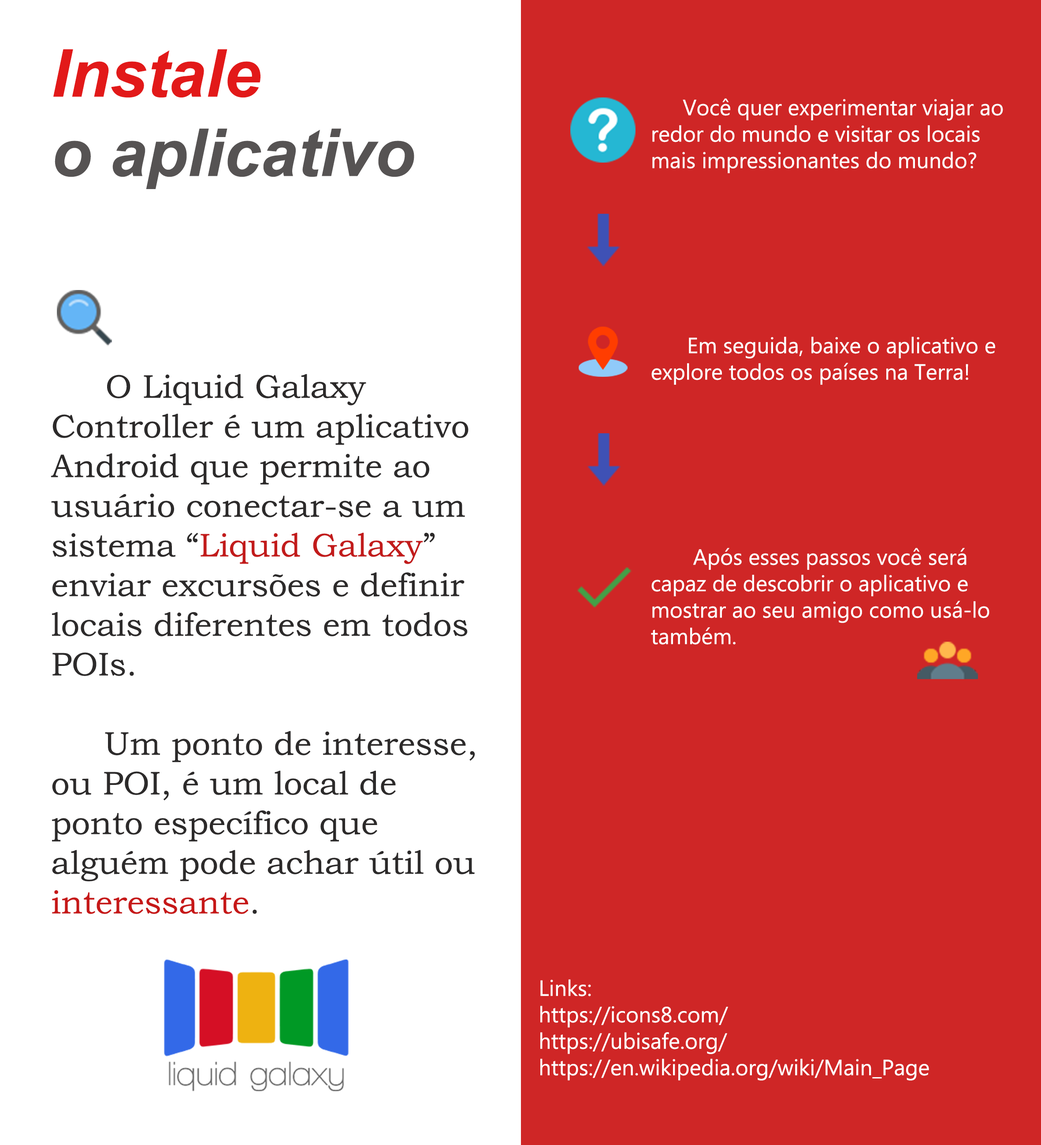
<style>
.page{position:relative;width:1041px;height:1145px;background:#cf2626}
.page>*{position:absolute;margin:0}
.t1{font:66.1px "Arial-BoldItalicMT";color:#565353}
.t2{font:66.1px "Arial-BoldItalicMT";color:#e21919}
.t3{font:22px "MicrosoftPhagsPa";color:#ffffff}
.t4{font:66.1px "AcuminConcept-BoldItalic";color:#ffffff}
.t5{font:33.1px "BookmanOldStyle";color:#2c2a2a}
.t6{font:33.1px "MicrosoftPhagsPa";color:#494747}
.t7{font:33.1px "BookmanOldStyle";color:#c21b1b}
.t8{font:33.1px "BookmanOldStyle";color:#c61818}
.t9{font:5.3px "MicrosoftPhagsPa";color:#ffffff}
</style>
<div class="page">
<p class="t1" style="left:53px;top:49px;width:361px;height:140px"><span class="t2">Instale <br></span>o aplicativo</p>
<p class="t3" style="left:651px;top:98px;width:352px;height:547px"><span class="t4">  </span>Você quer experimentar viajar ao redor do mundo e visitar os locais mais impressionantes do mundo?<br><br><br><br><br><br><br>      Em seguida, baixe o aplicativo e explore todos os países na Terra!<br><br><br><br><br><br><br>       Após esses passos você será capaz de descobrir o aplicativo e mostrar ao seu amigo como usá-lo também.</p>
<p class="t5" style="left:51px;top:374px;width:424px;height:540px"><span class="t6">      </span>O Liquid Galaxy Controller é um aplicativo Android que permite ao usuário conectar-se a um sistema “<span class="t7">Liquid Galaxy</span>” enviar excursões e definir locais diferentes em todos POIs.<br>      <br>     Um ponto de interesse, ou POI, é um local de ponto específico que alguém pode achar útil ou <span class="t8">interessante</span>.</p>
<p class="t9" style="left:540px;top:979px;width:389px;height:102px">Links:<br>   https://icons8.com/<br>   https://ubisafe.org/<br>   https://en.wikipedia.org/wiki/Main_Page</p>
</div>
